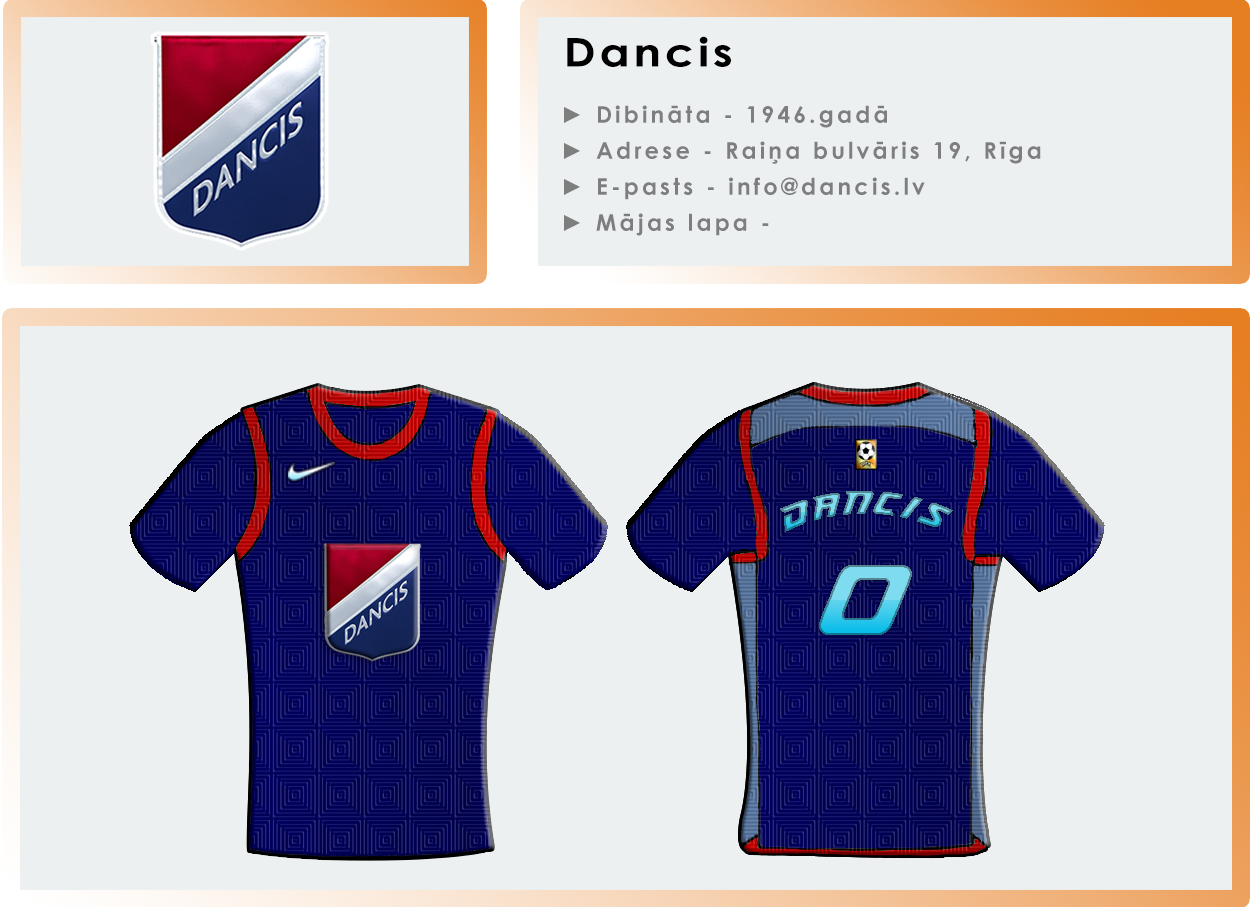
<style>
.page{position:relative;width:1252px;height:907px;background:#ecf0f1}
.page>*{position:absolute;margin:0}
.t1{font:39.7px "CenturyGothic-Bold";letter-spacing:0.08em;color:#000000;scale:1.16 1}
.t2{font:23.1px/36px "CenturyGothic-Bold";letter-spacing:0.14em;color:#7e7e7e}
.t3{font:31.3px "RichardsonBrandAccelerator"}
.t4{font:100px "RichardsonBrandAccelerator"}
</style>
<div class="page">
<p class="t1" style="left:567px;top:36px;width:164px;height:31px">Dancis</p>
<p class="t2" style="left:564px;top:105px;width:477px;height:131px">► Dibināta - 1946.gadā<br>► Adrese - Raiņa bulvāris 19, Rīga<br>► E-pasts - info@dancis.lv<br>► Mājas lapa -</p>
<p class="t3" style="left:780px;top:491px;width:173px;height:41px">Dancis</p>
<p class="t4" style="left:819px;top:565px;width:93px;height:70px">0</p>
</div>
